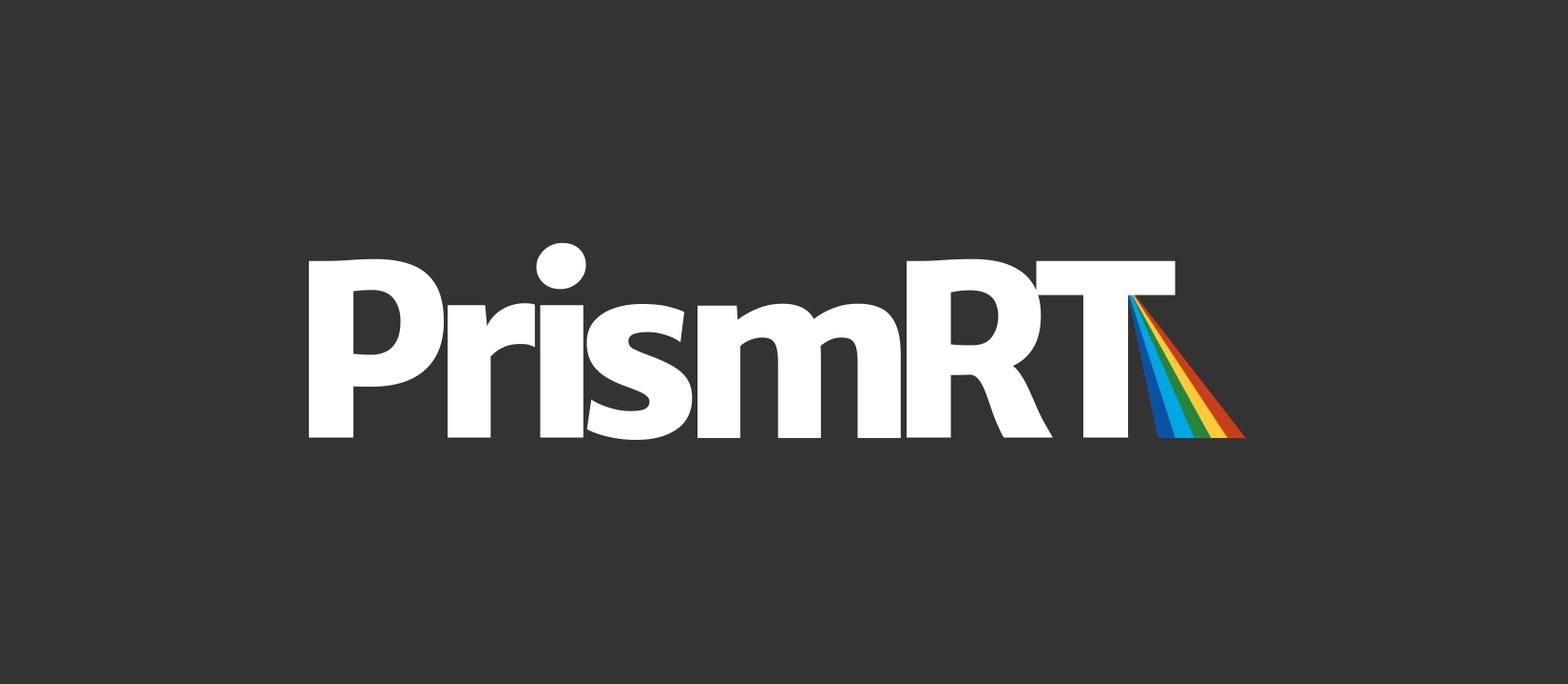
<style>
.page{position:relative;width:1568px;height:684px;background:#333333}
.page>*{position:absolute;margin:0}
.t1{font:237.6px "MerriweatherSansRoman-ExtraBold";color:#ffffff}
</style>
<div class="page">
<p class="t1" style="left:309px;top:242px;width:867px;height:198px">PrismRT</p>
</div>
